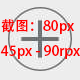
<style>
.page{position:relative;width:80px;height:80px;background:#ededed}
.page>*{position:absolute;margin:0}
.t1{font:14px "AdobeHeitiStd-Regular";color:#ff0000}
</style>
<div class="page">
<p class="t1" style="left:0px;top:19px;width:80px;height:40px">截图：80px<br>45px - 90rpx</p>
</div>
